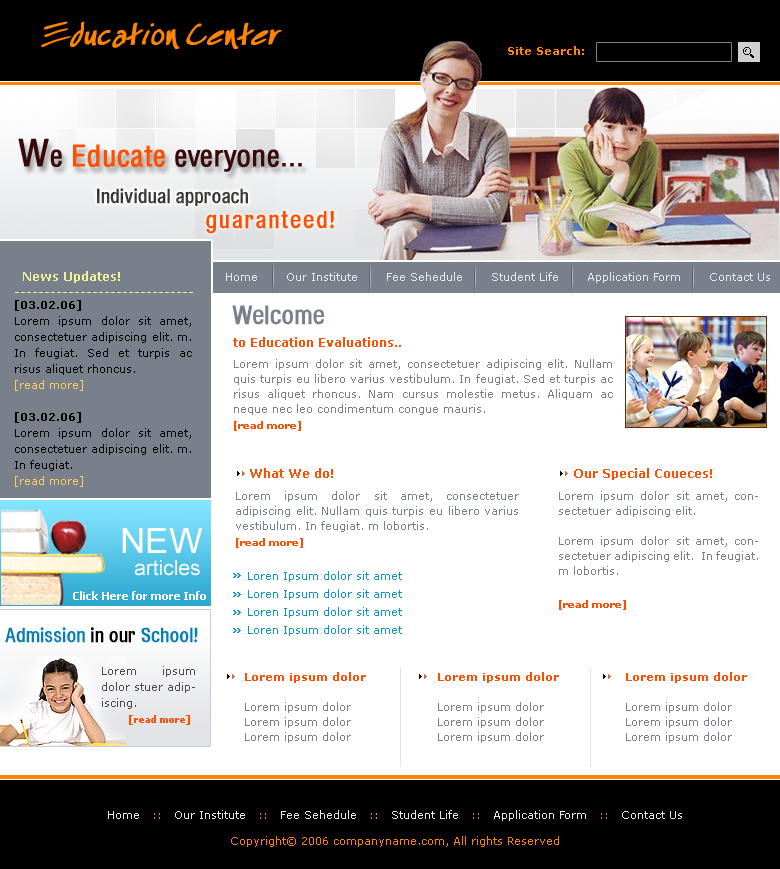
<style>
.page{position:relative;width:780px;height:869px;background:#ffffff}
.page>*{position:absolute;margin:0}
.t1{font:42px "EspecialKay";color:#ff8400;font-weight:bold}
.t2{font:11px "Verdana-Bold";color:#ff8400}
.t3{font:30px "HeliosCond";color:#390909;font-weight:bold}
.t4{font:38px "HeliosCond";color:#390909;font-weight:bold}
.t5{font:30px "HeliosCond";color:#ff4e00;font-weight:bold}
.t6{font:20px "HeadacheNormal";color:#3a3a3a}
.t7{font:24px "HeadacheNormal";letter-spacing:0.06em;color:#ff4e00}
.t8{font:12px/16px "Verdana-Bold";color:#f1f494}
.t9{font:11px "Verdana";color:#e7e8eb}
.t10{font:11px/16px "Verdana";color:#000000}
.t11{font:11px/16px "Verdana-Bold";color:#000000}
.t12{font:11px/16px "Verdana";color:#feca5a}
.t13{font:26px "HeadacheNormal";color:#78818b}
.t14{font:12px "Verdana-Bold";color:#ff4e00}
.t15{font:11px/15px "Verdana";color:#78818b}
.t16{font:10px/16px "Verdana-Bold";color:#ff4e00}
.t17{font:11px/18px "Verdana";color:#0b92d0}
.t18{font:35px "ArialMT";color:#ffffff}
.t19{font:21px "ArialMT";color:#ffffff}
.t20{font:11px "Tahoma-Bold";color:#ffffff}
.t21{font:20px "HeadacheNormal";color:#057eb6}
.t22{font:20px "HeadacheNormal";color:#000000}
.t23{font:11px/16px "Verdana";color:#4f4949}
.t24{font:10px/16px "Tahoma-Bold";color:#ff4e00}
.t25{font:11px/15px "Verdana-Bold";color:#ff4e00}
.t26{font:11px "Verdana";color:#ff8400}
</style>
<div class="page">
<p class="t1" style="left:41px;top:21px;width:241px;height:28px">Education Center</p>
<p class="t2" style="left:508px;top:46px;width:76px;height:9px">Site Search:</p>
<p class="t3" style="left:18px;top:138px;width:284px;height:34px"><span class="t4">W</span>e <span class="t5">Educate </span>everyone...</p>
<p class="t6" style="left:97px;top:188px;width:151px;height:18px">Individual approach</p>
<p class="t7" style="left:206px;top:211px;width:128px;height:23px">guaranteed!</p>
<p class="t8" style="left:15px;top:271px;width:178px;height:22px">News Updates!<br>------------------------------</p>
<p class="t9" style="left:226px;top:272px;width:544px;height:11px">Home       Our Institute       Fee Sehedule       Student Life       Application Form       Contact Us</p>
<p class="t10" style="left:15px;top:300px;width:177px;height:187px;text-align:justify"><span class="t11">[03.02.06]<br></span>Lorem ipsum dolor sit amet, consectetuer adipiscing elit. m. In feugiat. Sed et turpis ac risus aliquet rhoncus.<br><span class="t12">[read more]<br><br></span><span class="t11">[03.02.06]<br></span>Lorem ipsum dolor sit amet, consectetuer adipiscing elit. m. In feugiat. <br><span class="t12">[read more]</span></p>
<p class="t13" style="left:232px;top:305px;width:92px;height:20px">Welcome</p>
<p class="t14" style="left:233px;top:337px;width:168px;height:10px">to Education Evaluations..</p>
<p class="t15" style="left:234px;top:359px;width:379px;height:72px;text-align:justify">Lorem ipsum dolor sit amet, consectetuer adipiscing elit. Nullam quis turpis eu libero varius vestibulum. In feugiat. Sed et turpis ac risus aliquet rhoncus. Nam cursus molestie metus. Aliquam ac neque nec leo condimentum congue mauris.<br><span class="t16">[read more]</span></p>
<p class="t14" style="left:250px;top:468px;width:83px;height:10px">What We do!</p>
<p class="t14" style="left:574px;top:468px;width:138px;height:12px">Our Special Coueces!</p>
<p class="t15" style="left:236px;top:491px;width:283px;height:145px;text-align:justify">Lorem ipsum dolor sit amet, consectetuer adipiscing elit. Nullam quis turpis eu libero varius vestibulum. In feugiat. m lobortis. <br><span class="t16">[read more]<br><br>   </span><span class="t17">Loren Ipsum dolor sit amet<br>   Loren Ipsum dolor sit amet<br>   Loren Ipsum dolor sit amet<br>   Loren Ipsum dolor sit amet</span></p>
<p class="t15" style="left:559px;top:491px;width:199px;height:119px;text-align:justify">Lorem ipsum dolor sit amet, consectetuer adipiscing elit. <br><br>Lorem ipsum dolor sit amet, consectetuer adipiscing elit.  In feugiat. m lobortis. <br><br><span class="t16">[read more]</span></p>
<p class="t18" style="left:122px;top:528px;width:81px;height:25px">NEW</p>
<p class="t19" style="left:134px;top:560px;width:66px;height:16px">articles</p>
<p class="t20" style="left:73px;top:591px;width:133px;height:9px">Click Here for more Info</p>
<p class="t21" style="left:5px;top:627px;width:193px;height:16px">Admission <span class="t22">in our</span> School!</p>
<p class="t23" style="left:102px;top:666px;width:93px;height:59px;text-align:justify">Lorem ipsum dolor stuer adipiscing.<br>       <span class="t24">[read more]</span></p>
<p class="t15" style="left:245px;top:672px;width:121px;height:71px"><span class="t25">Lorem ipsum dolor<br><br></span>Lorem ipsum dolor<br>Lorem ipsum dolor<br>Lorem ipsum dolor</p>
<p class="t15" style="left:438px;top:672px;width:121px;height:71px"><span class="t25">Lorem ipsum dolor<br><br></span>Lorem ipsum dolor<br>Lorem ipsum dolor<br>Lorem ipsum dolor</p>
<p class="t15" style="left:626px;top:672px;width:121px;height:71px"><span class="t25">Lorem ipsum dolor<br><br></span>Lorem ipsum dolor<br>Lorem ipsum dolor<br>Lorem ipsum dolor</p>
<p class="t9" style="left:108px;top:810px;width:574px;height:11px">Home   <span class="t26">::</span>   Our Institute   <span class="t26">:: </span>  Fee Sehedule   <span class="t26">:: </span>  Student Life   <span class="t26">:: </span>  Application Form   <span class="t26">::  </span> Contact Us</p>
<p class="t26" style="left:231px;top:836px;width:328px;height:11px">Copyright© 2006 companyname.com, All rights Reserved</p>
</div>
